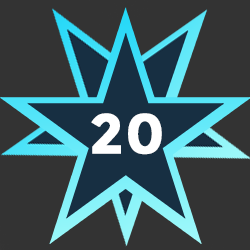
<style>
.page{position:relative;width:250px;height:250px;background:#333333}
.page>*{position:absolute;margin:0}
.t1{font:55.6px "Montserrat-Bold";letter-spacing:0.02em;color:#ffffff;font-weight:bold}
</style>
<div class="page">
<p class="t1" style="left:91px;top:113px;width:71px;height:42px">20</p>
</div>
